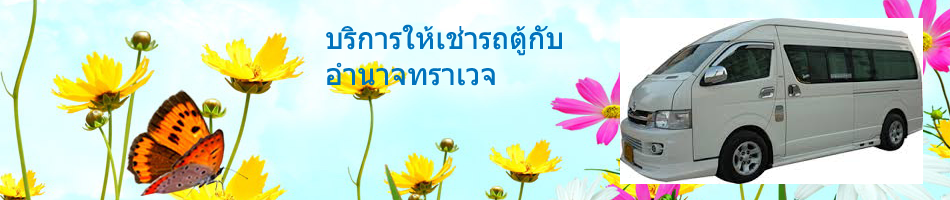
<style>
.page{position:relative;width:950px;height:200px}
.page>*{position:absolute;margin:0}
.t1{font:30px "Tahoma";color:#0072bc;text-transform:uppercase}
</style>
<div class="page">
<p class="t1" style="left:326px;top:24px;width:236px;height:62px">บริการให้เช่ารถตู้กับ<br>อำนาจทราเวจ</p>
</div>
